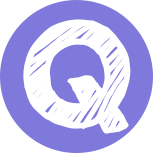
<style>
.page{position:relative;width:153px;height:154px;background:#ffffff}
.page>*{position:absolute;margin:0}
.t1{font:125px "KGSecondChancesSketch";color:#ffffff;font-weight:bold}
</style>
<div class="page">
<p class="t1" style="left:23px;top:19px;width:108px;height:115px">Q</p>
</div>
